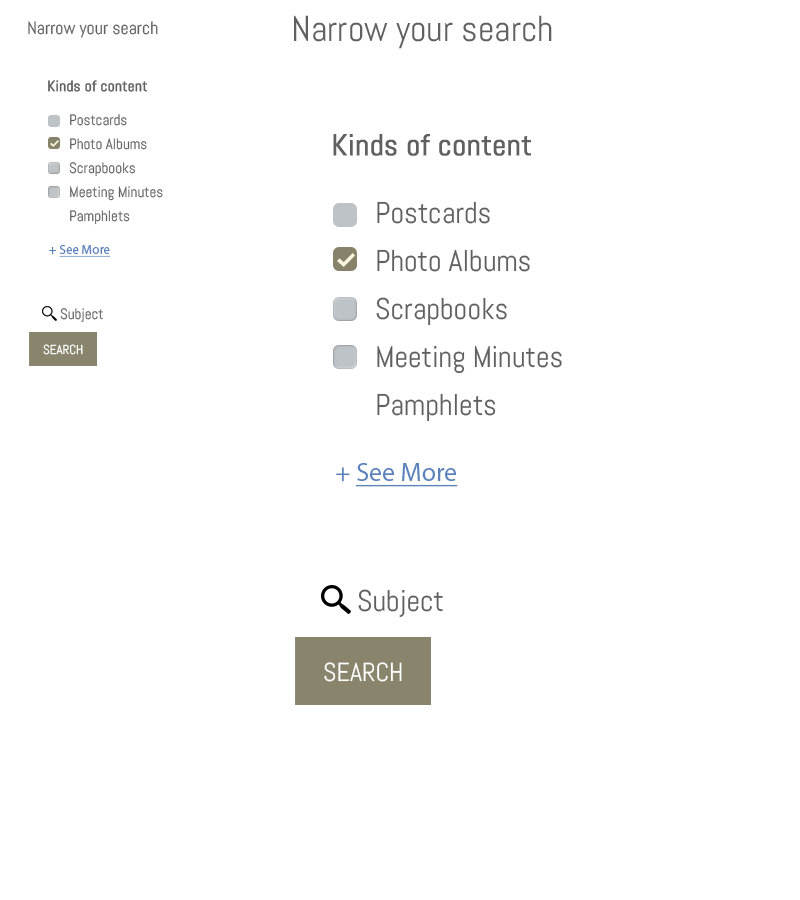
<style>
.page{position:relative;width:800px;height:900px;background:#ffffff}
.page>*{position:absolute;margin:0}
.t1{font:36px "Abel-Regular";color:#606060}
.t2{font:18px "Abel-Regular";color:#606060}
.t3{font:15px "Abel-Regular";color:#606060;font-weight:bold}
.t4{font:15px/24px "Abel-Regular";color:#606060}
.t5{font:30px "Abel-Regular";color:#606060;font-weight:bold}
.t6{font:30px/48px "Abel-Regular";color:#606060}
.t7{font:13px "MyriadPro-Regular";color:#5c82bb;text-decoration:underline}
.t8{font:13px "MyriadPro-Regular";color:#5c82bb}
.t9{font:15px "Abel-Regular";color:#606060}
.t10{font:13px "Abel-Regular";color:#ffffff}
.t11{font:26px "MyriadPro-Regular";color:#5c82bb;text-decoration:underline}
.t12{font:26px "MyriadPro-Regular";color:#5c82bb}
.t13{font:30px "Abel-Regular";color:#606060}
.t14{font:26px "Abel-Regular";color:#ffffff}
</style>
<div class="page">
<p class="t1" style="left:294px;top:15px;width:258px;height:34px">Narrow your search</p>
<p class="t2" style="left:28px;top:21px;width:130px;height:17px">Narrow your search</p>
<p class="t3" style="left:48px;top:80px;width:100px;height:12px">Kinds of content</p>
<p class="t4" style="left:69px;top:114px;width:94px;height:111px">Postcards<br>Photo Albums<br>Scrapbooks<br>Meeting Minutes<br>Pamphlets</p>
<p class="t5" style="left:333px;top:134px;width:198px;height:22px">Kinds of content</p>
<p class="t6" style="left:376px;top:201px;width:186px;height:221px">Postcards<br>Photo Albums<br>Scrapbooks<br>Meeting Minutes<br>Pamphlets</p>
<p class="t7" style="left:49px;top:245px;width:62px;height:12px"><span class="t8">+ </span>See More</p>
<p class="t9" style="left:60px;top:308px;width:43px;height:15px">Subject</p>
<p class="t10" style="left:43px;top:344px;width:40px;height:11px">SEARCH</p>
<p class="t11" style="left:336px;top:463px;width:122px;height:24px"><span class="t12">+ </span>See More</p>
<p class="t13" style="left:358px;top:589px;width:85px;height:28px">Subject</p>
<p class="t14" style="left:324px;top:662px;width:78px;height:20px">SEARCH</p>
</div>
